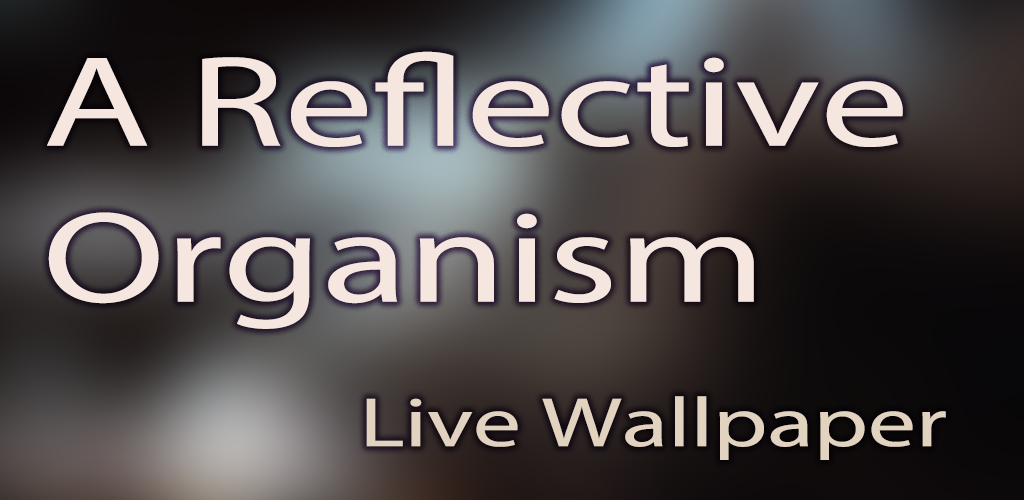
<style>
.page{position:relative;width:1024px;height:500px}
.page>*{position:absolute;margin:0}
.t1{font:130px "MyriadPro-Regular";color:#f5e6e0;scale:1.37 1}
.t2{font:70px "MyriadPro-Regular";color:#e2d2c0;scale:1.37 1}
</style>
<div class="page">
<p class="t1" style="left:47px;top:51px;width:856px;height:278px">A Reflective Organism</p>
<p class="t2" style="left:366px;top:396px;width:580px;height:64px">Live Wallpaper</p>
</div>
